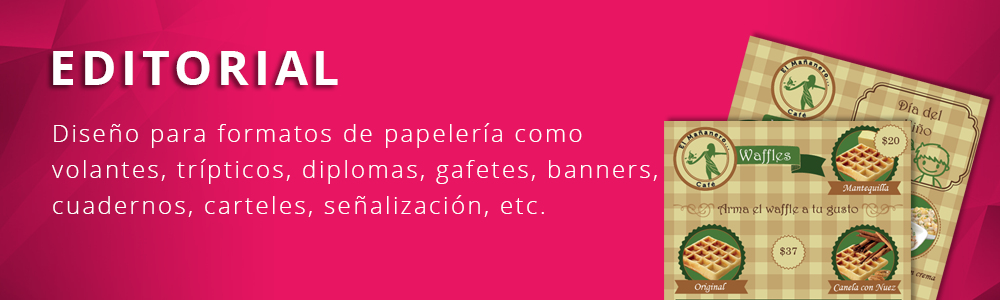
<style>
.page{position:relative;width:1000px;height:300px;background:#e81562}
.page>*{position:absolute;margin:0}
.t1{font:48px "OpenSans-Bold";letter-spacing:0.1em;color:#ffffff}
.t2{font:24px/36px "OpenSans-Light";letter-spacing:0.1em;color:#ffffff}
</style>
<div class="page">
<p class="t1" style="left:53px;top:51px;width:285px;height:34px">EDITORIAL</p>
<p class="t2" style="left:52px;top:123px;width:605px;height:94px">Diseño para formatos de papelería como volantes, trípticos, diplomas, gafetes, banners, cuadernos, carteles, señalización, etc.</p>
</div>
